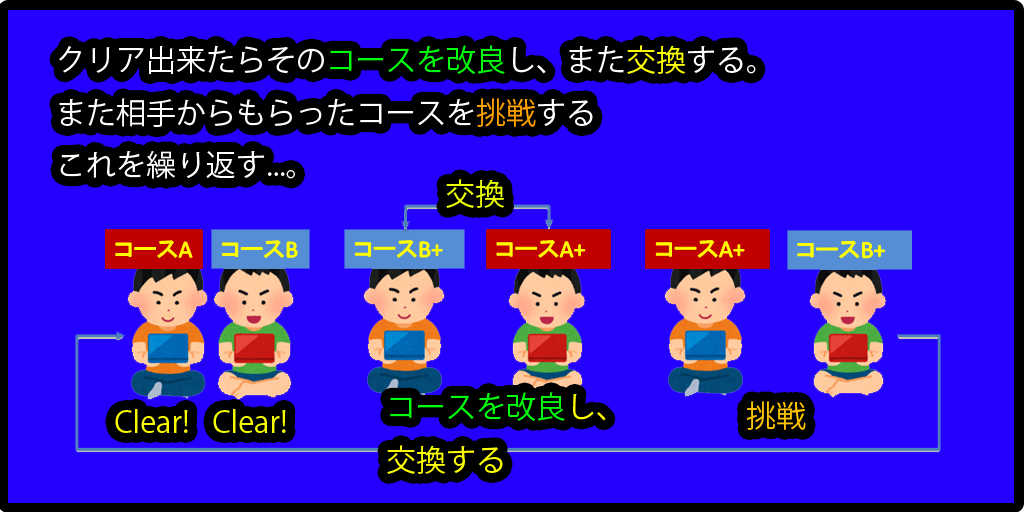
<style>
.page{position:relative;width:1024px;height:512px;background:#2400ff}
.page>*{position:absolute;margin:0}
.t1{font:30px "KozGoPro-Regular";color:#ffffff}
.t2{font:30px "KozGoPro-Regular";color:#00ff0c}
.t3{font:30px "KozGoPro-Regular";color:#fcff00}
.t4{font:30px "KozGoPro-Regular";color:#ffa200}
.t5{font:30px "KozGoPro-Regular";color:#eaff00}
.t6{font:30px "KozGoPro-Regular";color:#ffc600}
.t7{font:30px "KozGoPro-Regular";color:#f6ff00}
</style>
<div class="page">
<p class="t1" style="left:59px;top:45px;width:697px;height:134px">クリア出来たらその<span class="t2">コースを改良</span>し、また<span class="t3">交換</span>する。<br>また相手からもらったコースを<span class="t4">挑戦</span>する<br>これを繰り返す...。</p>
<p class="t5" style="left:446px;top:179px;width:59px;height:29px">交換</p>
<p class="t3" style="left:387px;top:392px;width:219px;height:82px"><span class="t2">コースを改良</span>し、<br>交換する</p>
<p class="t6" style="left:746px;top:401px;width:60px;height:29px">挑戦</p>
<p class="t3" style="left:115px;top:409px;width:73px;height:24px">Clear!</p>
<p class="t7" style="left:213px;top:409px;width:73px;height:24px">Clear!</p>
</div>
